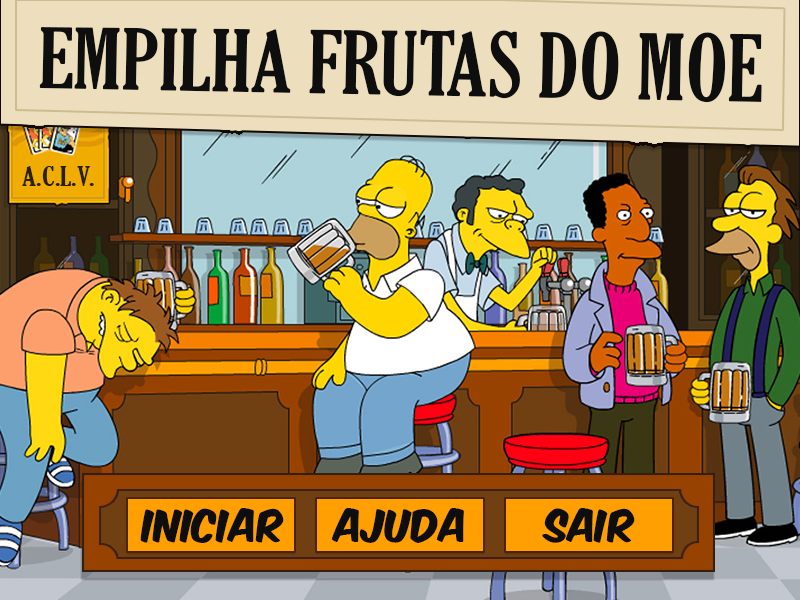
<style>
.page{position:relative;width:800px;height:600px}
.page>*{position:absolute;margin:0}
.t1{font:79.7px "GloucesterMT-ExtraCondensed";color:#0e0e0e;scale:1.17 1}
.t2{font:25.6px "GloucesterMT-ExtraCondensed";color:#292008;scale:1.26 1}
.t3{font:38px "KomikaAxis";color:#0e0e0e}
</style>
<div class="page">
<p class="t1" style="left:39px;top:27px;width:723px;height:76px;rotate:1deg">EMPILHA FRUTAS DO MOE</p>
<p class="t2" style="left:22px;top:166px;width:72px;height:20px">A.C.L.V.</p>
<p class="t3" style="left:140px;top:508px;width:144px;height:35px">INICIAR</p>
<p class="t3" style="left:331px;top:508px;width:133px;height:35px">AJUDA</p>
<p class="t3" style="left:542px;top:508px;width:93px;height:35px">SAir</p>
</div>
